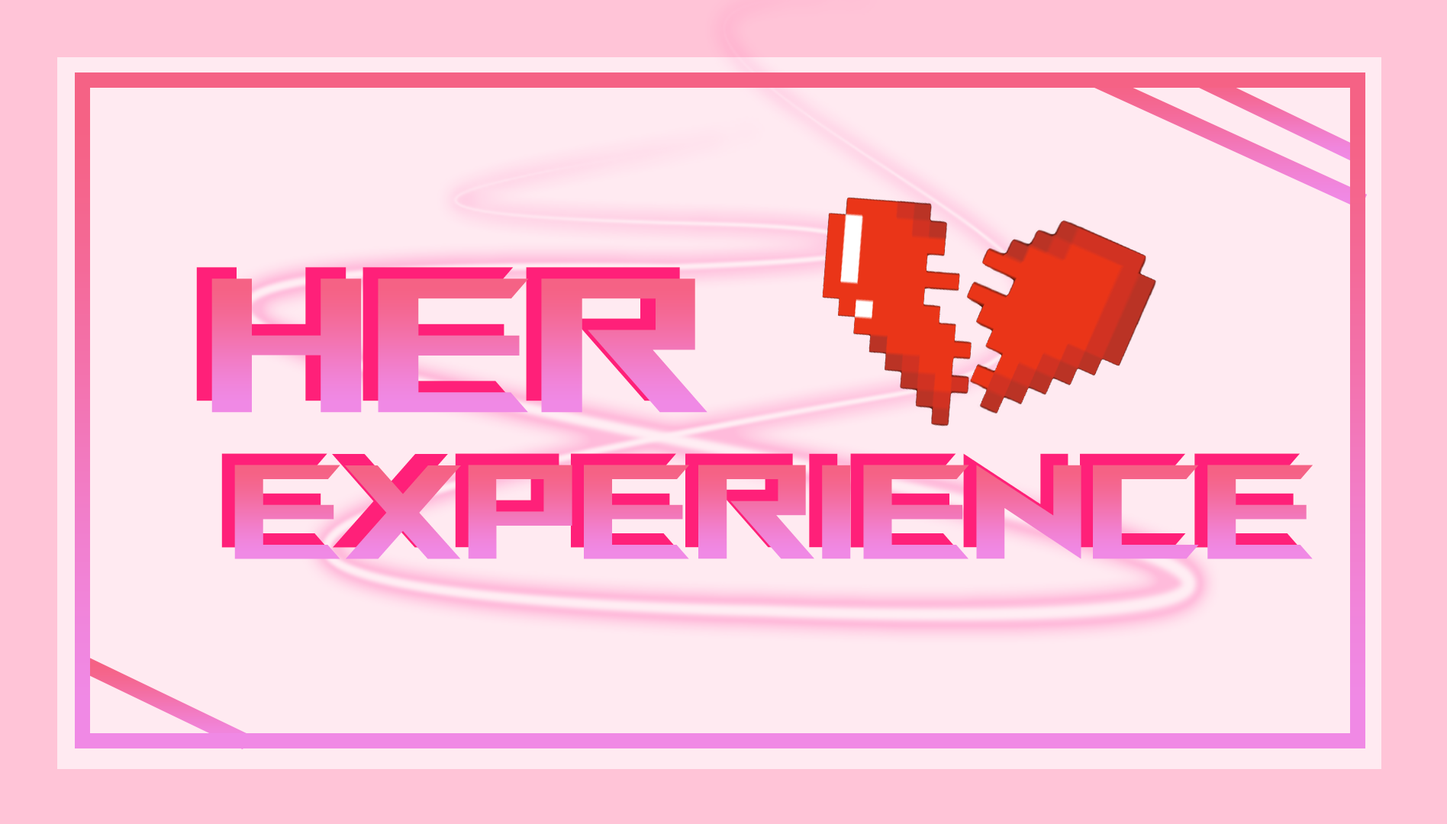
<style>
.page{position:relative;width:1447px;height:824px;background:#ffeaf1}
.page>*{position:absolute;margin:0}
.t1{font:190.8px "ROGFonts-Regular"}
.t2{font:133.5px "ROGFonts-Regular"}
</style>
<div class="page">
<p class="t1" style="left:196px;top:267px;width:496px;height:134px">her</p>
<p class="t1" style="left:211px;top:279px;width:496px;height:134px">her</p>
<p class="t2" style="left:221px;top:453px;width:1079px;height:95px">experience</p>
<p class="t2" style="left:234px;top:465px;width:1079px;height:94px">experience</p>
</div>
